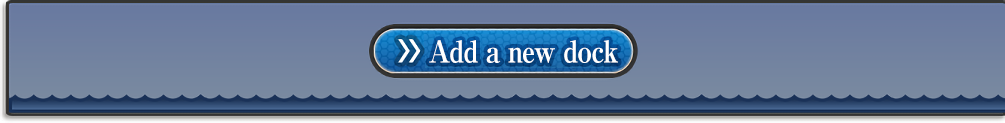
<style>
.page{position:relative;width:1005px;height:123px}
.page>*{position:absolute;margin:0}
.t1{font:30px "RyuminPro-ExBold";letter-spacing:-0.04em;color:#ffffff;scale:0.9 1}
</style>
<div class="page">
<p class="t1" style="left:429px;top:40px;width:189px;height:23px">Add a new dock</p>
</div>
